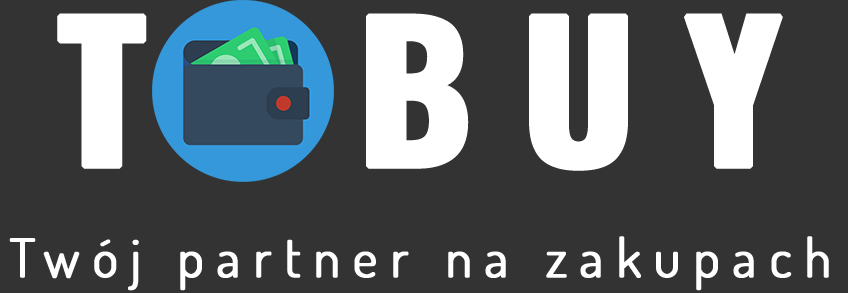
<style>
.page{position:relative;width:848px;height:293px;background:#333333}
.page>*{position:absolute;margin:0}
.t1{font:185px "Oswald-Bold";letter-spacing:0.22em;color:#ffffff;font-weight:bold;scale:1.06 1}
.t2{font:53.3px "Dosis-Regular";letter-spacing:0.22em;color:#ffffff;font-weight:bold}
</style>
<div class="page">
<p class="t1" style="left:57px;top:11px;width:726px;height:160px">TOBUY</p>
<p class="t2" style="left:9px;top:236px;width:820px;height:55px">Twój partner na zakupach</p>
</div>
